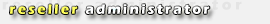
<style>
.page{position:relative;width:270px;height:24px;background:#f1f1f1}
.page>*{position:absolute;margin:0}
.t1{font:14px "ErasITC-Bold";letter-spacing:0.16em}
</style>
<div class="page">
<p class="t1" style="left:10px;top:4px;width:200px;height:10px">reseller administrator</p>
</div>
